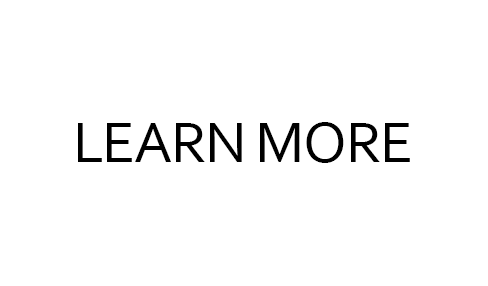
<style>
.page{position:relative;width:488px;height:286px;background:#ffffff}
.page>*{position:absolute;margin:0}
.t1{font:60px "Corbel";letter-spacing:-0.025em;color:#000000}
</style>
<div class="page">
<p class="t1" style="left:78px;top:122px;width:332px;height:41px">LEARN MORE</p>
</div>
